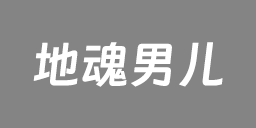
<style>
.page{position:relative;width:256px;height:128px;background:#848484}
.page>*{position:absolute;margin:0}
.t1{font:50px "DingTalk-JinBuTi";letter-spacing:-0.06em;color:#ffffff;font-weight:bold}
</style>
<div class="page">
<p class="t1" style="left:33px;top:42px;width:190px;height:45px">地魂男儿</p>
</div>
